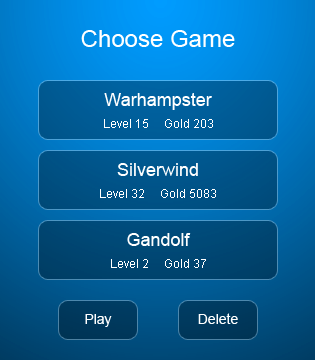
<style>
.page{position:relative;width:315px;height:360px}
.page>*{position:absolute;margin:0}
.t1{font:24px "ArialMT";color:#ffffff}
.t2{font:18px "ArialMT";color:#ffffff}
.t3{font:12px "ArialMT";color:#ffffff}
.t4{font:14px "ArialMT";color:#ffffff}
</style>
<div class="page">
<p class="t1" style="left:81px;top:30px;width:154px;height:17px">Choose Game</p>
<p class="t2" style="left:104px;top:93px;width:108px;height:17px">Warhampster</p>
<p class="t3" style="left:104px;top:119px;width:109px;height:9px">Level 15     Gold 203</p>
<p class="t2" style="left:117px;top:163px;width:81px;height:13px">Silverwind</p>
<p class="t3" style="left:100px;top:189px;width:116px;height:9px">Level 32     Gold 5083</p>
<p class="t2" style="left:127px;top:233px;width:64px;height:13px">Gandolf</p>
<p class="t3" style="left:111px;top:259px;width:95px;height:9px">Level 2     Gold 37</p>
<p class="t4" style="left:85px;top:314px;width:27px;height:13px">Play</p>
<p class="t4" style="left:198px;top:313px;width:40px;height:11px">Delete</p>
</div>
